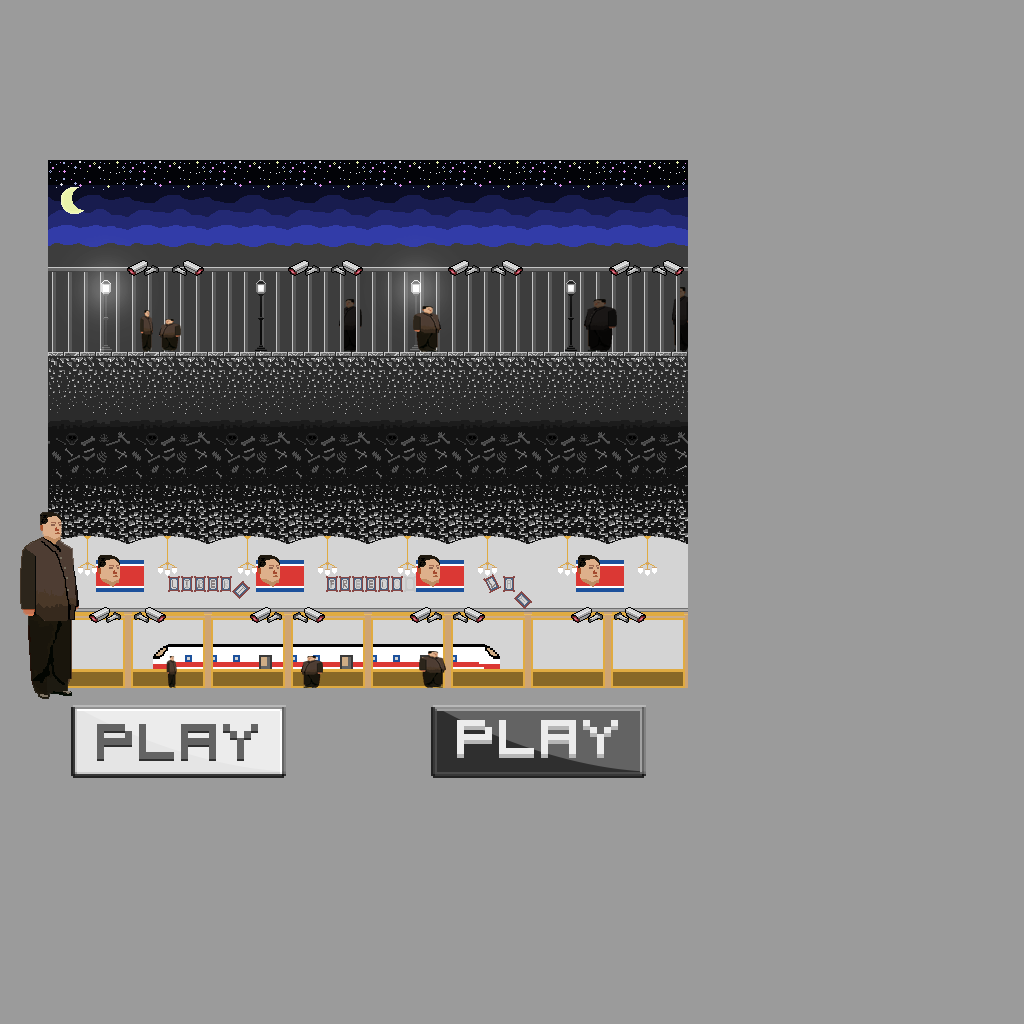
<style>
.page{position:relative;width:1024px;height:1024px;background:#9b9b9b}
.page>*{position:absolute;margin:0}
.t1{font:90px "VisitorTT2BRK";color:#636363}
.t2{font:90px "VisitorTT2BRK";color:#ececec}
</style>
<div class="page">
<p class="t1" style="left:97px;top:724px;width:161px;height:35px">Play</p>
<p class="t2" style="left:457px;top:720px;width:161px;height:35px">Play</p>
</div>
